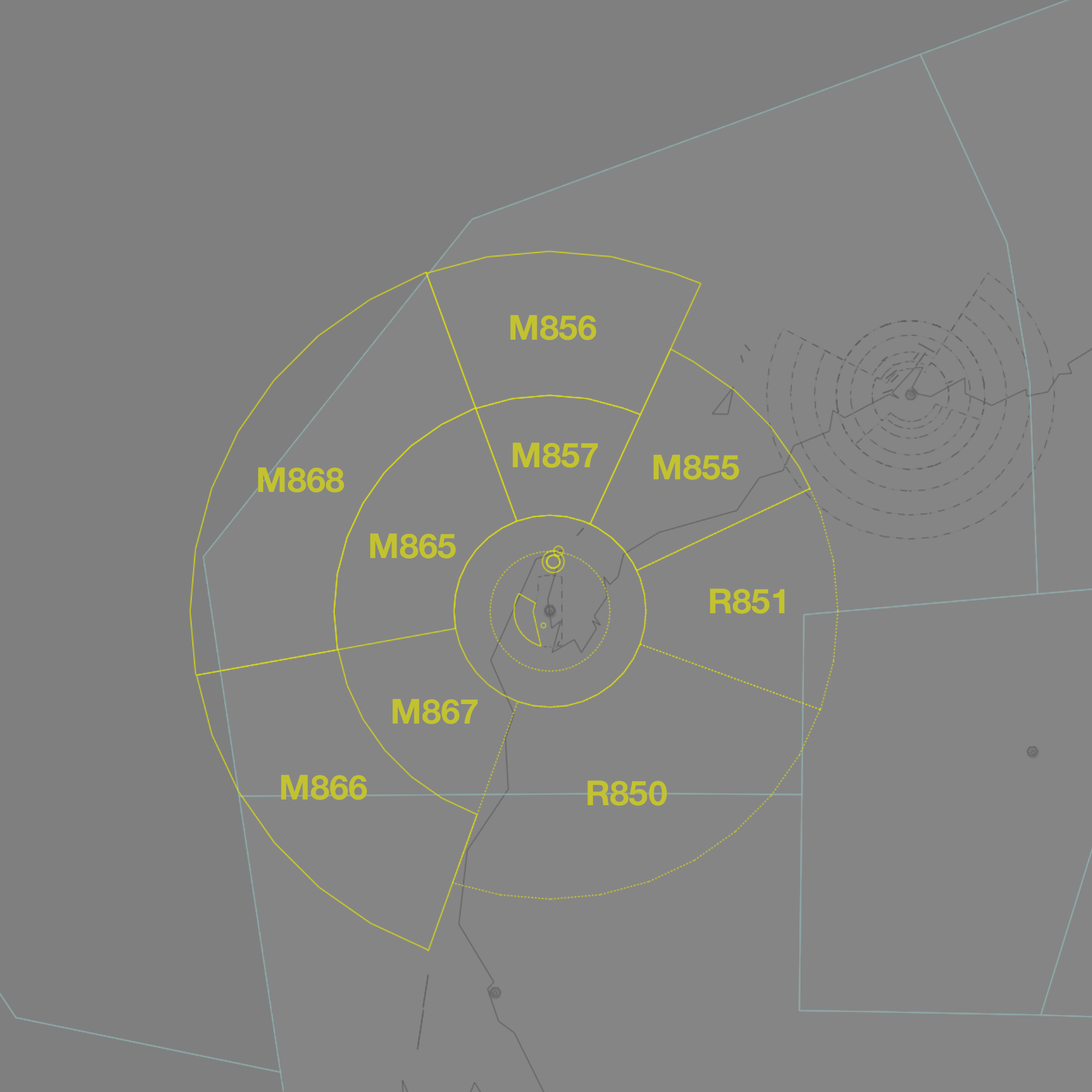
<style>
.page{position:relative;width:1092px;height:1092px;background:#858585}
.page>*{position:absolute;margin:0}
.t1{font:34.5px "HelveticaNeue-Bold";color:#c2c231}
</style>
<div class="page">
<p class="t1" style="left:510px;top:315px;width:87px;height:25px">M856</p>
<p class="t1" style="left:513px;top:443px;width:85px;height:25px">M857</p>
<p class="t1" style="left:653px;top:455px;width:86px;height:25px">M855</p>
<p class="t1" style="left:258px;top:467px;width:86px;height:26px">M868</p>
<p class="t1" style="left:370px;top:533px;width:86px;height:26px">M865</p>
<p class="t1" style="left:710px;top:589px;width:75px;height:25px">R851</p>
<p class="t1" style="left:393px;top:699px;width:85px;height:25px">M867</p>
<p class="t1" style="left:281px;top:775px;width:86px;height:25px">M866</p>
<p class="t1" style="left:587px;top:780px;width:80px;height:26px">R850</p>
</div>
